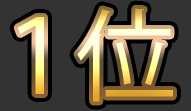
<style>
.page{position:relative;width:191px;height:111px;background:#333333}
.page>*{position:absolute;margin:0}
.t1{font:100px "KozGoPr6N-Regular";letter-spacing:-0.1em}
</style>
<div class="page">
<p class="t1" style="left:17px;top:8px;width:156px;height:94px">１位</p>
</div>
